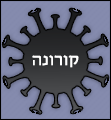
<style>
.page{position:relative;width:111px;height:120px}
.page>*{position:absolute;margin:0}
.t1{font:15.8px "GuttmanHatzvi";color:#ffffff}
</style>
<div class="page">
<p class="t1" style="left:32px;top:55px;width:47px;height:13px">הנורוק</p>
</div>
